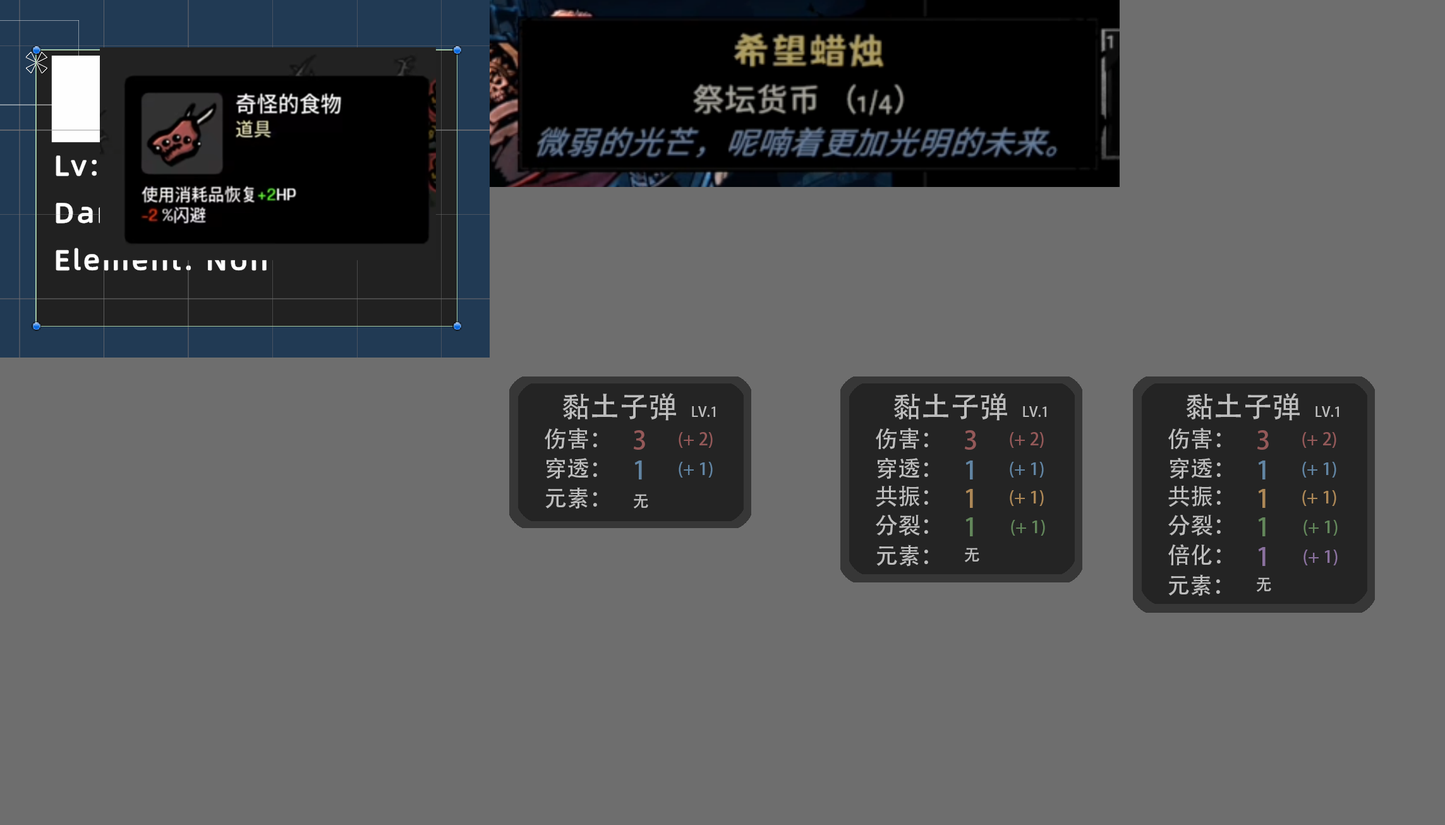
<style>
.page{position:relative;width:1445px;height:825px;background:#6e6e6e}
.page>*{position:absolute;margin:0}
.t1{font:29.1px "AdobeHeitiStd-Regular";color:#bdbdbd;text-transform:uppercase}
.t2{font:13.9px "AdobeHeitiStd-Regular";color:#bdbdbd;text-transform:uppercase}
.t3{font:22.7px "AdobeHeitiStd-Regular";color:#bdbdbd;text-transform:uppercase}
.t4{font:25.3px "AdobeHeitiStd-Regular";color:#945959;text-transform:uppercase}
.t5{font:17.1px "AdobeHeitiStd-Regular";color:#945959;text-transform:uppercase}
.t6{font:25.3px "AdobeHeitiStd-Regular";color:#6285a3;text-transform:uppercase}
.t7{font:17.1px "AdobeHeitiStd-Regular";color:#6285a3;text-transform:uppercase}
.t8{font:16.4px "AdobeHeitiStd-Regular";color:#bdbdbd;text-transform:uppercase}
.t9{font:25.3px "AdobeHeitiStd-Regular";color:#ad8857;text-transform:uppercase}
.t10{font:17.1px "AdobeHeitiStd-Regular";color:#ad8857;text-transform:uppercase}
.t11{font:25.3px "AdobeHeitiStd-Regular";color:#63875b;text-transform:uppercase}
.t12{font:17.1px "AdobeHeitiStd-Regular";color:#63875b;text-transform:uppercase}
.t13{font:25.3px "AdobeHeitiStd-Regular";color:#8a719e;text-transform:uppercase}
.t14{font:17.1px "AdobeHeitiStd-Regular";color:#8a719e;text-transform:uppercase}
</style>
<div class="page">
<p class="t1" style="left:562px;top:393px;width:114px;height:28px">黏土子弹</p>
<p class="t1" style="left:893px;top:393px;width:114px;height:28px">黏土子弹</p>
<p class="t1" style="left:1186px;top:393px;width:114px;height:28px">黏土子弹</p>
<p class="t2" style="left:692px;top:406px;width:23px;height:11px">LV.1</p>
<p class="t2" style="left:1023px;top:406px;width:23px;height:11px">LV.1</p>
<p class="t2" style="left:1316px;top:406px;width:23px;height:11px">LV.1</p>
<p class="t3" style="left:545px;top:428px;width:52px;height:21px">伤害：</p>
<p class="t4" style="left:633px;top:430px;width:12px;height:20px">3</p>
<p class="t5" style="left:679px;top:432px;width:34px;height:16px">(+ 2)</p>
<p class="t3" style="left:876px;top:428px;width:52px;height:21px">伤害：</p>
<p class="t4" style="left:964px;top:430px;width:12px;height:20px">3</p>
<p class="t5" style="left:1010px;top:432px;width:34px;height:16px">(+ 2)</p>
<p class="t3" style="left:1168px;top:428px;width:53px;height:21px">伤害：</p>
<p class="t4" style="left:1257px;top:430px;width:12px;height:20px">3</p>
<p class="t5" style="left:1302px;top:432px;width:34px;height:16px">(+ 2)</p>
<p class="t3" style="left:546px;top:458px;width:51px;height:21px">穿透：</p>
<p class="t6" style="left:634px;top:461px;width:8px;height:19px">1</p>
<p class="t7" style="left:679px;top:462px;width:34px;height:16px">(+ 1)</p>
<p class="t3" style="left:877px;top:458px;width:51px;height:21px">穿透：</p>
<p class="t6" style="left:965px;top:461px;width:8px;height:19px">1</p>
<p class="t7" style="left:1010px;top:462px;width:34px;height:16px">(+ 1)</p>
<p class="t3" style="left:1170px;top:458px;width:51px;height:21px">穿透：</p>
<p class="t6" style="left:1258px;top:461px;width:8px;height:19px">1</p>
<p class="t7" style="left:1302px;top:462px;width:34px;height:16px">(+ 1)</p>
<p class="t3" style="left:876px;top:485px;width:52px;height:22px">共振：</p>
<p class="t3" style="left:1168px;top:485px;width:53px;height:22px">共振：</p>
<p class="t3" style="left:545px;top:487px;width:52px;height:22px">元素：</p>
<p class="t8" style="left:634px;top:494px;width:14px;height:15px">无</p>
<p class="t9" style="left:965px;top:489px;width:8px;height:19px">1</p>
<p class="t10" style="left:1010px;top:490px;width:34px;height:16px">(+ 1)</p>
<p class="t9" style="left:1258px;top:489px;width:8px;height:19px">1</p>
<p class="t10" style="left:1302px;top:490px;width:34px;height:16px">(+ 1)</p>
<p class="t3" style="left:876px;top:515px;width:52px;height:21px">分裂：</p>
<p class="t11" style="left:965px;top:517px;width:8px;height:19px">1</p>
<p class="t12" style="left:1011px;top:520px;width:34px;height:16px">(+ 1)</p>
<p class="t3" style="left:1168px;top:515px;width:53px;height:21px">分裂：</p>
<p class="t11" style="left:1258px;top:517px;width:8px;height:19px">1</p>
<p class="t12" style="left:1304px;top:520px;width:34px;height:16px">(+ 1)</p>
<p class="t3" style="left:876px;top:545px;width:52px;height:22px">元素：</p>
<p class="t3" style="left:1168px;top:544px;width:53px;height:22px">倍化：</p>
<p class="t8" style="left:965px;top:548px;width:14px;height:14px">无</p>
<p class="t13" style="left:1258px;top:547px;width:8px;height:19px">1</p>
<p class="t14" style="left:1304px;top:550px;width:34px;height:16px">(+ 1)</p>
<p class="t3" style="left:1168px;top:574px;width:52px;height:22px">元素：</p>
<p class="t8" style="left:1257px;top:578px;width:14px;height:14px">无</p>
</div>
